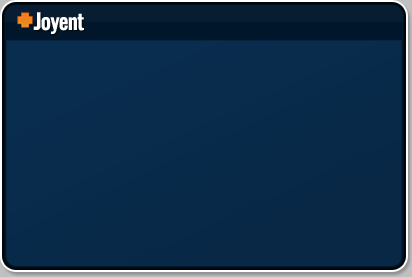
<style>
.page{position:relative;width:412px;height:277px}
.page>*{position:absolute;margin:0}
.t1{font:26.5px "GothicBoldCond";letter-spacing:-0.01em;color:#ffffff}
</style>
<div class="page">
<p class="t1" style="left:33px;top:12px;width:51px;height:22px">Joyent</p>
</div>
